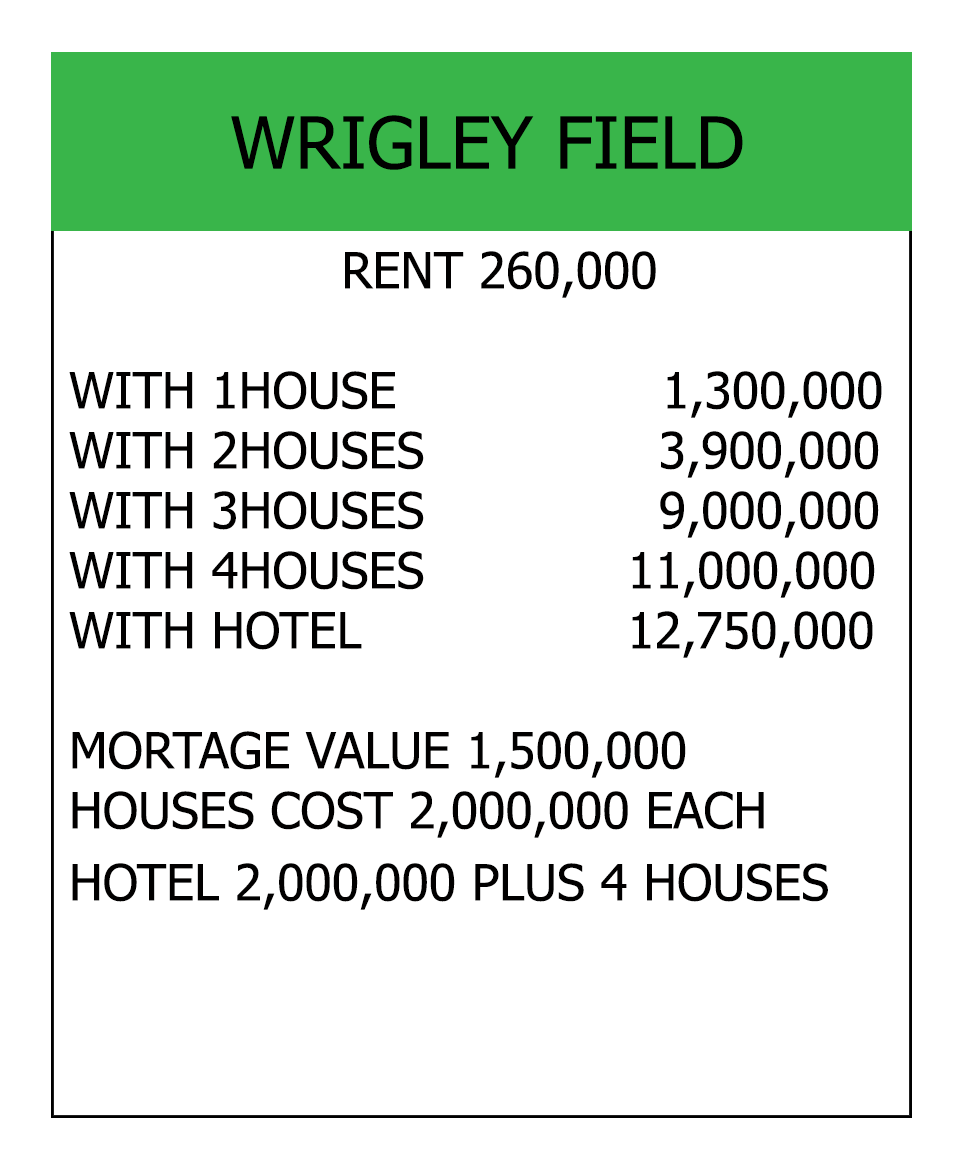
<style>
.page{position:relative;width:966px;height:1164px;background:#ffffff}
.page>*{position:absolute;margin:0}
.t1{font:72px "Tahoma";color:#000000}
.t2{font:50px "Tahoma";color:#010000}
</style>
<div class="page">
<p class="t1" style="left:231px;top:115px;width:512px;height:55px">WRIGLEY FIELD</p>
<p class="t2" style="left:69px;top:251px;width:813px;height:659px;text-align:center">RENT 260,000<br><br>WITH 1HOUSE                 1,300,000<br>WITH 2HOUSES               3,900,000<br>WITH 3HOUSES               9,000,000<br>WITH 4HOUSES             11,000,000<br>WITH HOTEL                 12,750,000<br><br>MORTAGE VALUE 1,500,000<br>HOUSES COST 2,000,000 EACH<br>HOTEL 2,000,000 PLUS 4 HOUSES</p>
</div>
